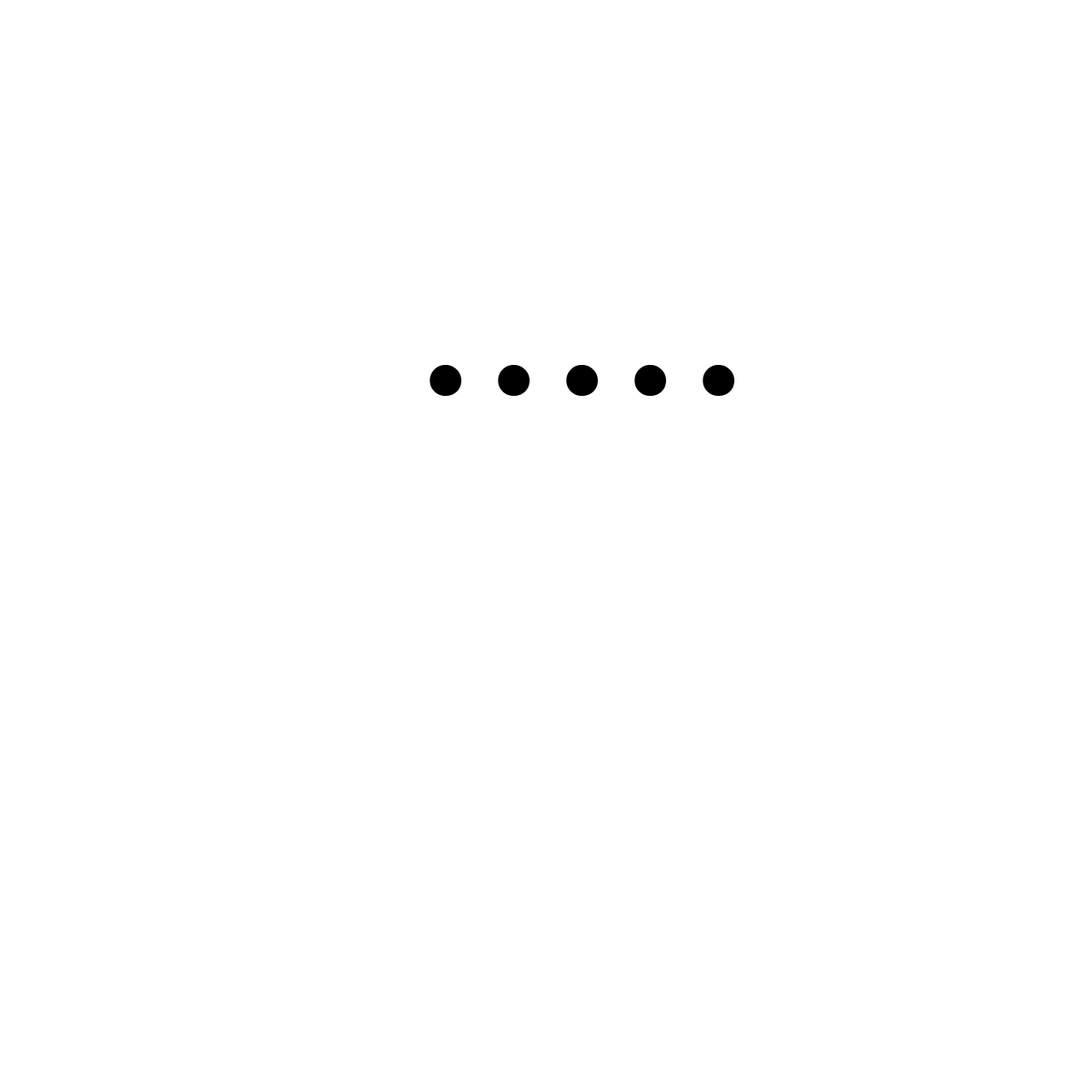
<style>
.page{position:relative;width:1092px;height:1092px;background:#ffffff}
.page>*{position:absolute;margin:0}
.t1{font:273px "KalpurushANSI";color:#000000}
</style>
<div class="page">
<p class="t1" style="left:430px;top:365px;width:304px;height:31px">.....</p>
</div>
